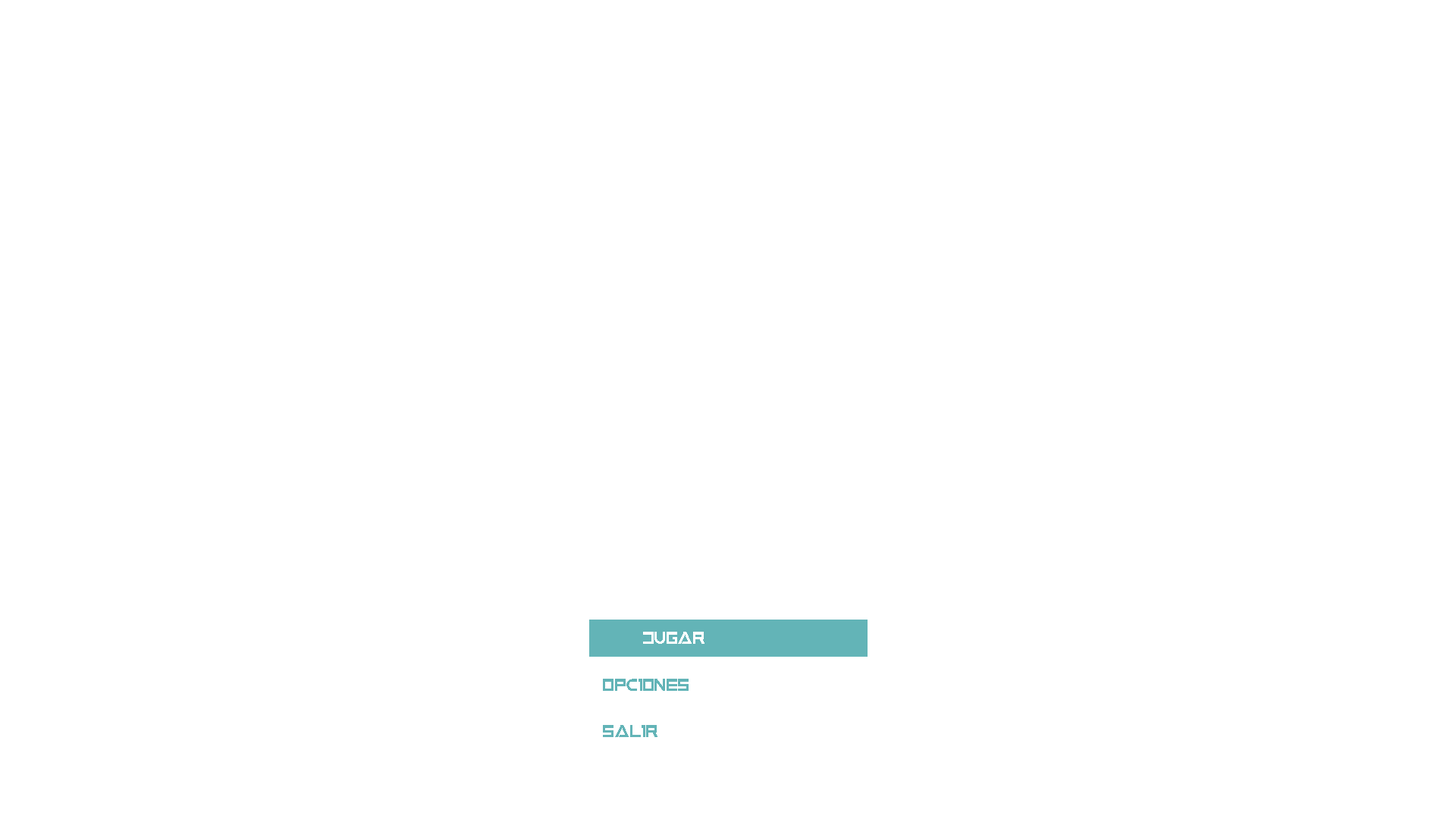
<style>
.page{position:relative;width:1456px;height:819px;background:#ffffff}
.page>*{position:absolute;margin:0}
.t1{font:17.8px "NeutronsDemoRegular";letter-spacing:0.03em;color:#ffffff}
.t2{font:17.8px "NeutronsDemoRegular";letter-spacing:0.03em;color:#63b4b7}
</style>
<div class="page">
<p class="t1" style="left:643px;top:632px;width:61px;height:12px">jugar</p>
<p class="t2" style="left:603px;top:679px;width:86px;height:12px">opciones</p>
<p class="t2" style="left:603px;top:725px;width:54px;height:12px">salir</p>
</div>
